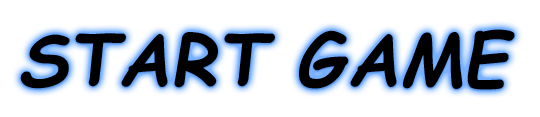
<style>
.page{position:relative;width:540px;height:117px;background:#ffffff}
.page>*{position:absolute;margin:0}
.t1{font:72px "ComicSansMS-BoldItalic";color:#000000}
</style>
<div class="page">
<p class="t1" style="left:20px;top:29px;width:495px;height:61px">START GAME</p>
</div>
